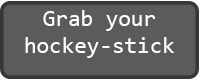
<style>
.page{position:relative;width:200px;height:80px;background:#5b5b59}
.page>*{position:absolute;margin:0}
.t1{font:22.9px "Consolas";color:#ffffff}
</style>
<div class="page">
<p class="t1" style="left:25px;top:10px;width:150px;height:48px;text-align:center">Grab your hockey-stick</p>
</div>
